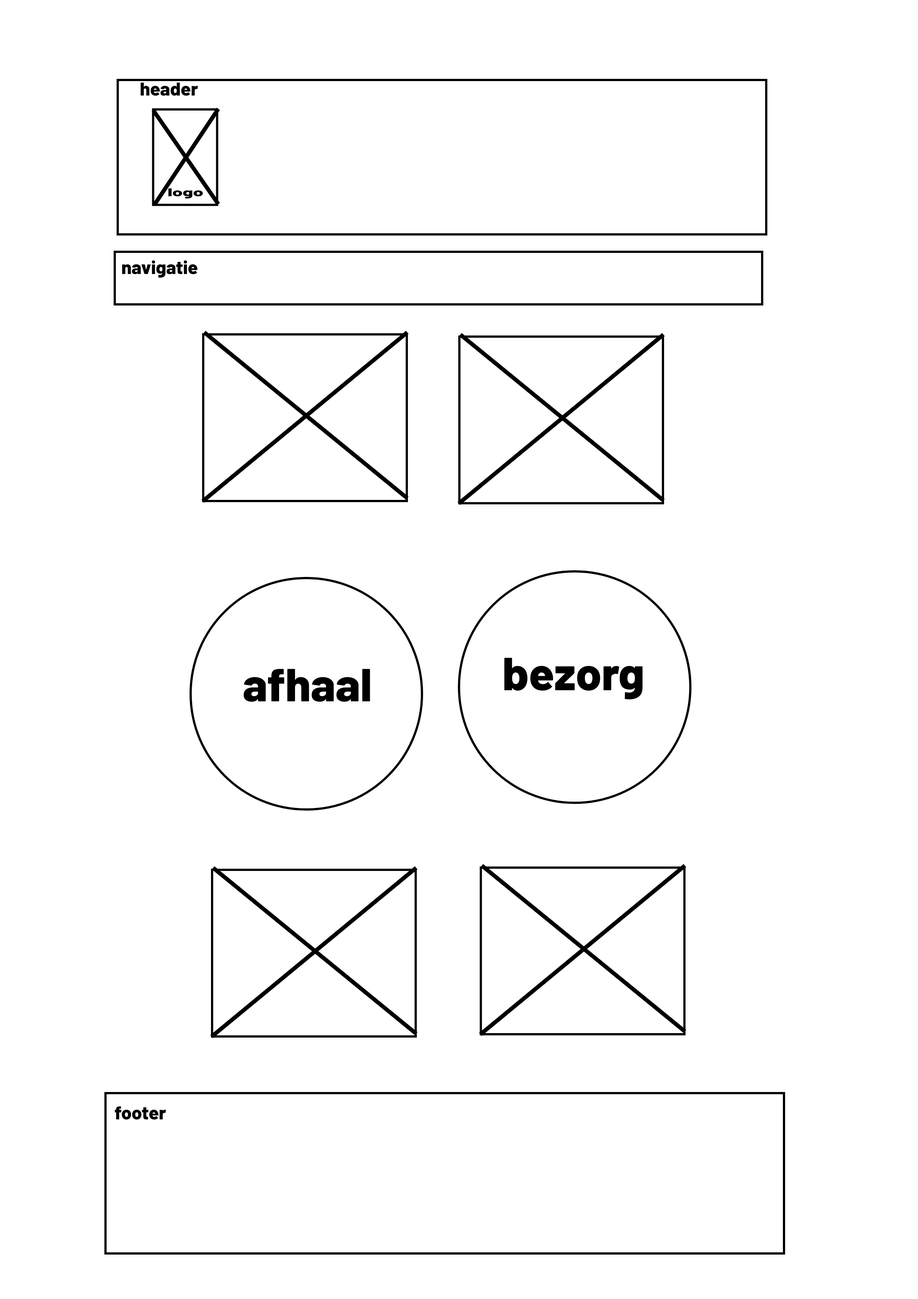
<style>
.page{position:relative;width:918px;height:1299px;background:#ffffff}
.page>*{position:absolute;margin:0}
.t1{font:18.5px "Barlow-ExtraBold";color:#000000}
.t2{font:11.2px "Barlow-ExtraBold";color:#000000;scale:1.66 1}
.t3{font:46.3px "Barlow-ExtraBold";color:#000000}
</style>
<div class="page">
<p class="t1" style="left:141px;top:83px;width:57px;height:13px">header</p>
<p class="t2" style="left:168px;top:188px;width:35px;height:10px">logo</p>
<p class="t1" style="left:122px;top:260px;width:76px;height:18px">navigatie</p>
<p class="t3" style="left:504px;top:658px;width:139px;height:41px">bezorg</p>
<p class="t3" style="left:244px;top:669px;width:126px;height:33px">afhaal</p>
<p class="t1" style="left:115px;top:1106px;width:51px;height:14px">footer</p>
</div>
